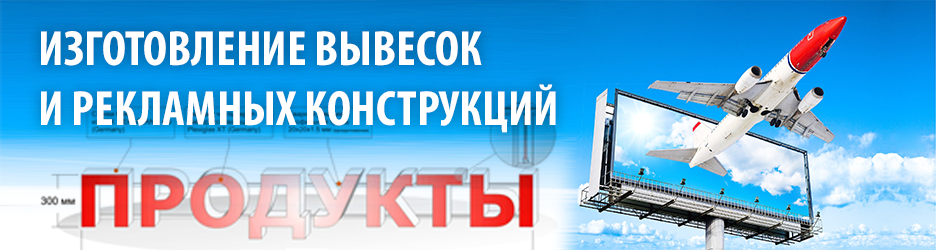
<style>
.page{position:relative;width:936px;height:250px}
.page>*{position:absolute;margin:0}
.t1{font:49.8px "MyriadPro-BoldCond";color:#ffffff;text-transform:uppercase}
</style>
<div class="page">
<p class="t1" style="left:41px;top:31px;width:515px;height:102px">Изготовление вывесок  <br>и РЕКЛАМНЫХ КОНСТРУКЦИЙ</p>
</div>
